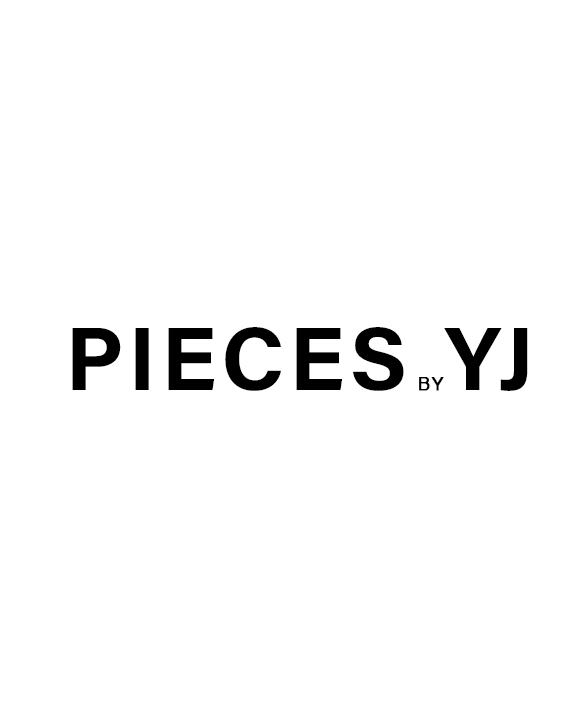
<style>
.page{position:relative;width:576px;height:720px;background:#ffffff}
.page>*{position:absolute;margin:0}
.t1{font:90px "AcuminConcept-Bold";letter-spacing:0.05em;color:#000000;font-weight:bold}
.t2{font:18px "Helvetica";letter-spacing:0.05em;color:#000000;font-weight:bold}
</style>
<div class="page">
<p class="t1" style="left:72px;top:327px;width:456px;height:64px">PIECES<span class="t2"> BY</span>YJ</p>
</div>
